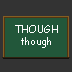
<style>
.page{position:relative;width:72px;height:72px;background:#333333}
.page>*{position:absolute;margin:0}
.t1{font:10px "ComicSansMS";color:#ffffff}
</style>
<div class="page">
<p class="t1" style="left:15px;top:25px;width:43px;height:23px;text-align:center">THOUGH<br>though</p>
</div>
